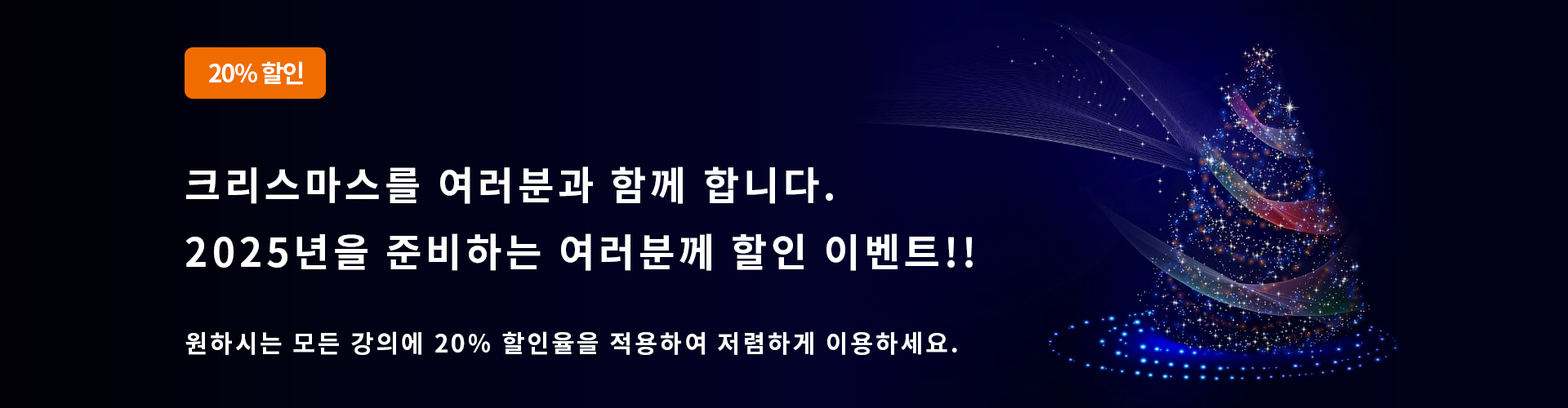
<style>
.page{position:relative;width:1568px;height:408px}
.page>*{position:absolute;margin:0}
.t1{font:24.5px "NotoSansKR-Bold";letter-spacing:-0.05em;color:#ffffff}
.t2{font:39.2px "NotoSansKR-Bold";letter-spacing:0.1em;color:#ffffff}
.t3{font:24.5px "NotoSansKR-Bold";letter-spacing:0.1em;color:#ffffff}
</style>
<div class="page">
<p class="t1" style="left:209px;top:61px;width:94px;height:24px">20% 할인</p>
<p class="t2" style="left:186px;top:167px;width:647px;height:37px">크리스마스를 여러분과 함께 합니다.</p>
<p class="t2" style="left:185px;top:234px;width:788px;height:37px">2025년을 준비하는 여러분께 할인 이벤트!!</p>
<p class="t3" style="left:185px;top:332px;width:772px;height:23px">원하시는 모든 강의에 20% 할인율을 적용하여 저렴하게 이용하세요.</p>
</div>
